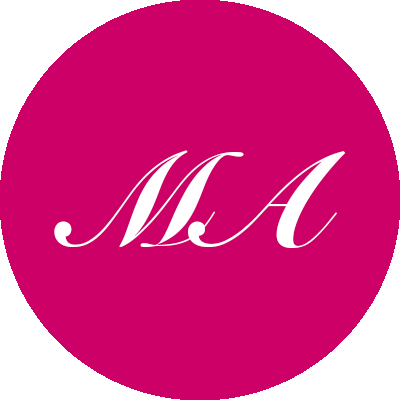
<style>
.page{position:relative;width:400px;height:400px;background:#cc0066}
.page>*{position:absolute;margin:0}
.t1{font:130px "SnellRoundhand-Black";color:#ffffff}
</style>
<div class="page">
<p class="t1" style="left:54px;top:150px;width:292px;height:98px">MA</p>
</div>
